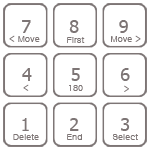
<style>
.page{position:relative;width:150px;height:150px;background:#ffffff}
.page>*{position:absolute;margin:0}
.t1{font:17.7px "Tahoma";color:#7d7575}
.t2{font:8.8px "Gulim";color:#7d7575}
</style>
<div class="page">
<p class="t1" style="left:22px;top:20px;width:9px;height:13px">7</p>
<p class="t1" style="left:69px;top:20px;width:10px;height:13px">8</p>
<p class="t1" style="left:119px;top:20px;width:9px;height:13px">9</p>
<p class="t2" style="left:9px;top:35px;width:31px;height:7px">&lt; Move</p>
<p class="t2" style="left:67px;top:37px;width:18px;height:6px">First</p>
<p class="t2" style="left:111px;top:35px;width:30px;height:7px">Move &gt;</p>
<p class="t1" style="left:22px;top:68px;width:10px;height:13px">4</p>
<p class="t1" style="left:71px;top:68px;width:9px;height:13px">5</p>
<p class="t1" style="left:120px;top:68px;width:10px;height:13px">6</p>
<p class="t2" style="left:23px;top:84px;width:6px;height:7px">&lt;</p>
<p class="t2" style="left:69px;top:85px;width:14px;height:6px">180</p>
<p class="t2" style="left:124px;top:85px;width:5px;height:7px">&gt;</p>
<p class="t1" style="left:22px;top:118px;width:7px;height:13px">1</p>
<p class="t1" style="left:70px;top:118px;width:9px;height:13px">2</p>
<p class="t1" style="left:121px;top:118px;width:9px;height:13px">3</p>
<p class="t2" style="left:13px;top:134px;width:26px;height:6px">Delete</p>
<p class="t2" style="left:67px;top:134px;width:15px;height:6px">End</p>
<p class="t2" style="left:112px;top:134px;width:26px;height:6px">Select</p>
</div>
